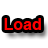
<style>
.page{position:relative;width:48px;height:48px;background:#ffffff}
.page>*{position:absolute;margin:0}
.t1{font:16px "Arial-BoldMT";color:#ff0000}
</style>
<div class="page">
<p class="t1" style="left:4px;top:18px;width:37px;height:12px">Load</p>
</div>
